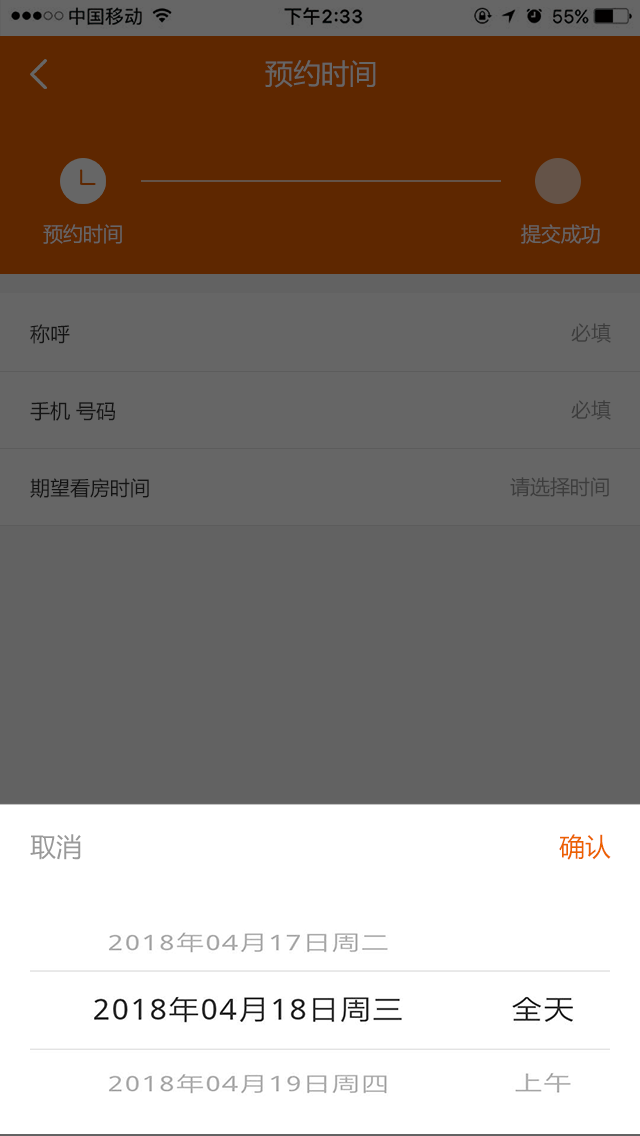
<style>
.page{position:relative;width:640px;height:1136px;background:#ffffff}
.page>*{position:absolute;margin:0}
.t1{font:28px "MicrosoftYaHei";color:#666666}
.t2{font:20px "MicrosoftYaHei";color:#666666}
.t3{font:20px "MicrosoftYaHei";color:#141414}
.t4{font:20px "MicrosoftYaHei";color:#3d3d3d}
.t5{font:26px "MicrosoftYaHei";color:#999999}
.t6{font:26px "MicrosoftYaHei";color:#ec6100}
</style>
<div class="page">
<p class="t1" style="left:265px;top:60px;width:111px;height:28px">预约时间</p>
<p class="t2" style="left:43px;top:224px;width:79px;height:20px">预约时间</p>
<p class="t2" style="left:521px;top:224px;width:79px;height:20px">提交成功</p>
<p class="t3" style="left:30px;top:324px;width:40px;height:20px">称呼</p>
<p class="t4" style="left:571px;top:323px;width:40px;height:20px">必填</p>
<p class="t3" style="left:30px;top:401px;width:85px;height:20px">手机 号码</p>
<p class="t4" style="left:571px;top:400px;width:40px;height:20px">必填</p>
<p class="t3" style="left:30px;top:478px;width:119px;height:20px">期望看房时间</p>
<p class="t4" style="left:510px;top:477px;width:99px;height:20px">请选择时间</p>
<p class="t5" style="left:30px;top:834px;width:51px;height:26px">取消</p>
<p class="t6" style="left:559px;top:834px;width:52px;height:26px">确认</p>
</div>
